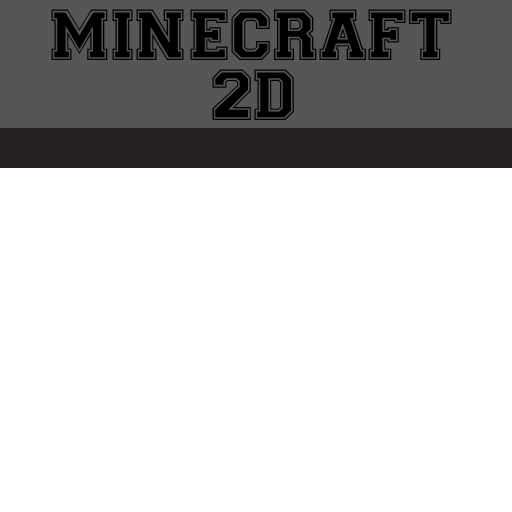
<style>
.page{position:relative;width:512px;height:512px;background:#ffffff}
.page>*{position:absolute;margin:0}
.t1{font:72px/60px "Varsity-Regular";color:#000000}
</style>
<div class="page">
<p class="t1" style="left:51px;top:9px;width:401px;height:111px;text-align:center">MINECRAFT<br>2D</p>
</div>
